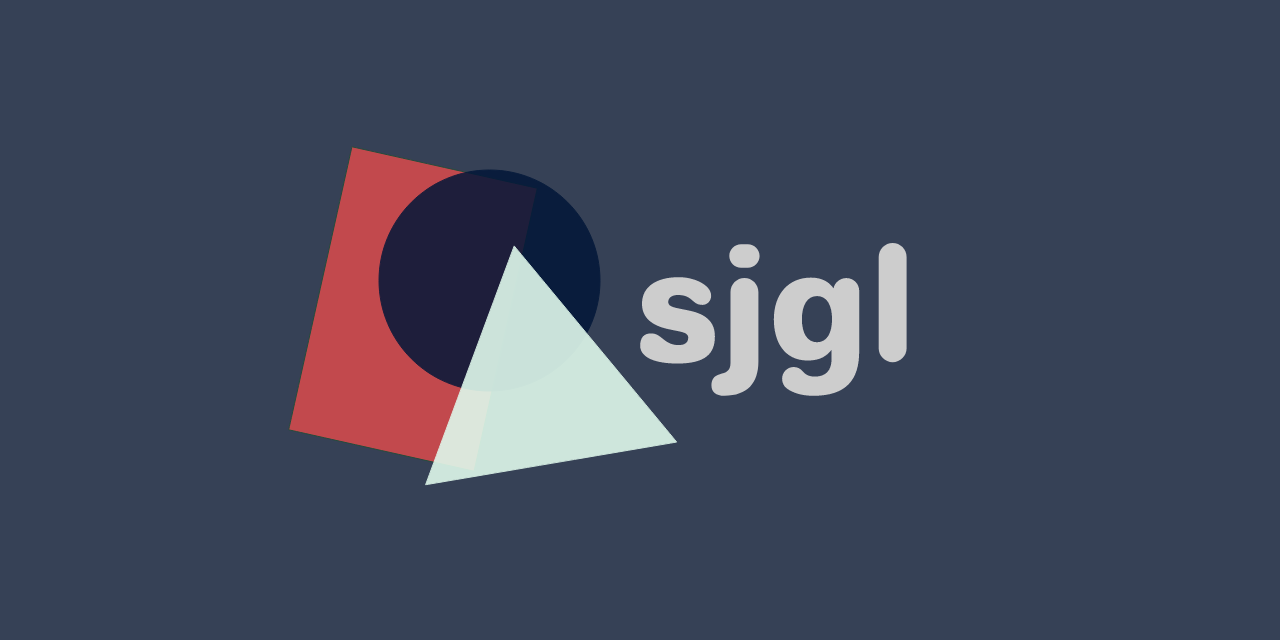
<style>
.page{position:relative;width:1280px;height:640px;background:#364156}
.page>*{position:absolute;margin:0}
.t1{font:150px "Jellee-Roman";color:#cdcdcd}
</style>
<div class="page">
<p class="t1" style="left:640px;top:243px;width:267px;height:153px">sjgl</p>
</div>
